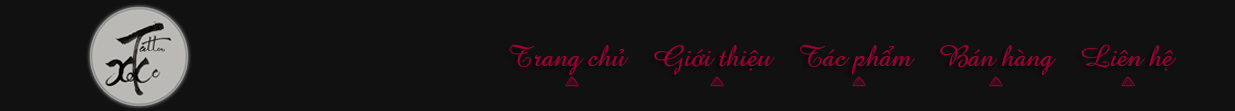
<style>
.page{position:relative;width:1235px;height:111px;background:#111111}
.page>*{position:absolute;margin:0}
.t1{font:30px "Amazone";color:#9f0036}
</style>
<div class="page">
<p class="t1" style="left:509px;top:44px;width:667px;height:31px">Trang chủ    Giới thiệu    Tác phẩm    Bán hàng    Liên hệ</p>
</div>
